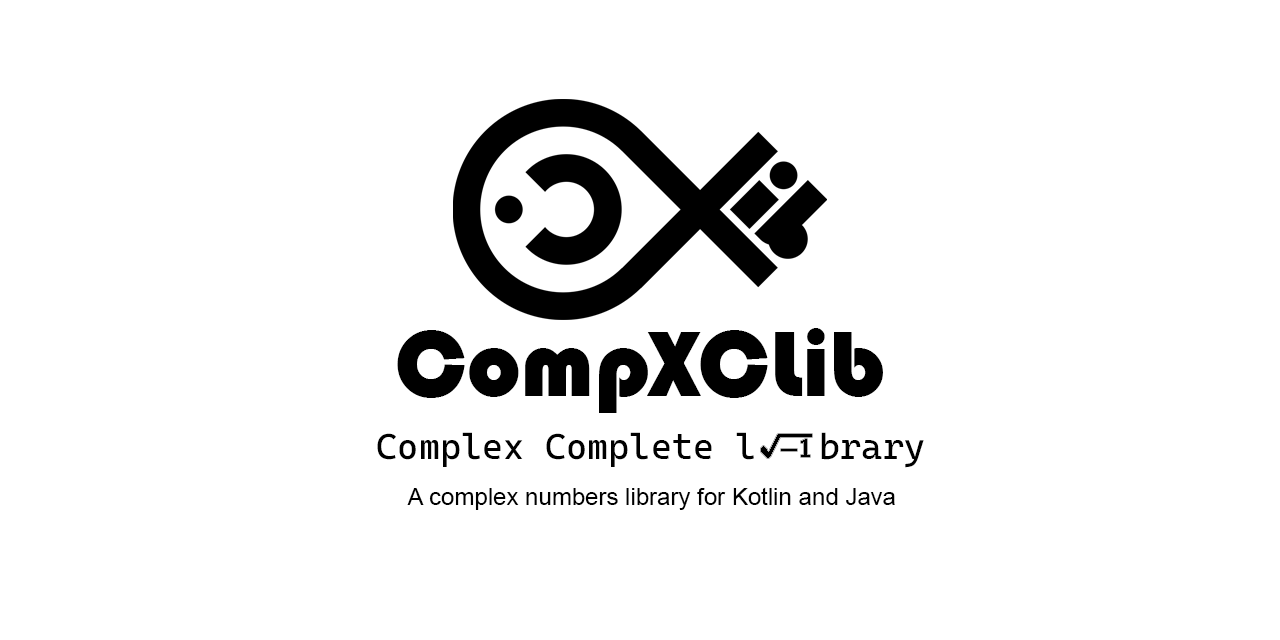
<style>
.page{position:relative;width:1280px;height:640px;background:#ffffff}
.page>*{position:absolute;margin:0}
.t1{font:96px "Bauhaus93";color:#000000}
.t2{font:36px "CascadiaMono-Regular";color:#000000}
.t3{font:24px "ArialMT";color:#000000}
</style>
<div class="page">
<p class="t1" style="left:397px;top:328px;width:486px;height:85px">CompXCLib</p>
<p class="t2" style="left:377px;top:432px;width:547px;height:36px">Complex Complete l   brary</p>
<p class="t3" style="left:407px;top:487px;width:488px;height:23px">A complex numbers library for Kotlin and Java</p>
</div>
